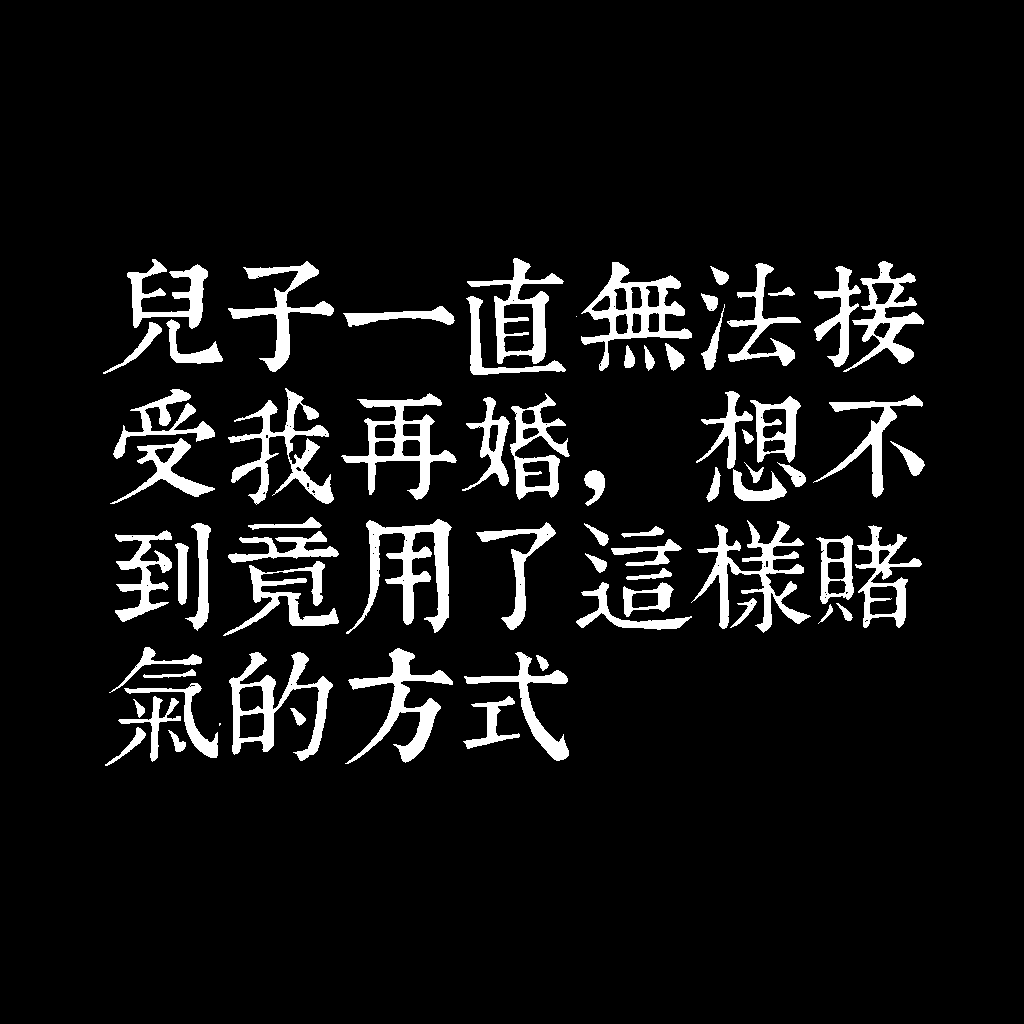
<style>
.page{position:relative;width:1024px;height:1024px;background:#000000}
.page>*{position:absolute;margin:0}
.t1{font:120px/130px "TpldKhangXiDictTrial";letter-spacing:-0.02em;color:#ffffff}
</style>
<div class="page">
<p class="t1" style="left:103px;top:258px;width:822px;height:508px">兒子一直無法接<br>受我再婚，想不<br>到竟用了這樣賭<br>氣的方式</p>
</div>
